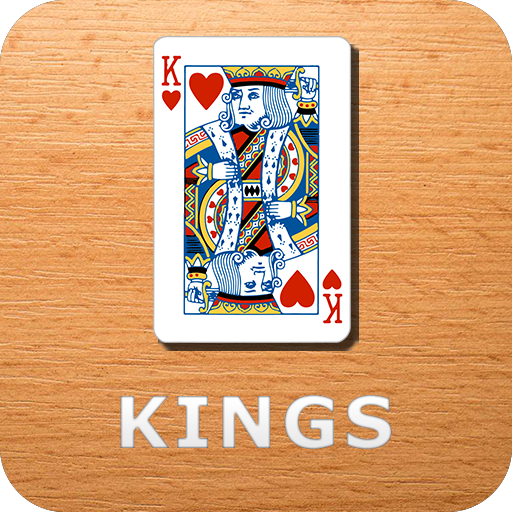
<style>
.page{position:relative;width:512px;height:512px}
.page>*{position:absolute;margin:0}
.t1{font:72px "Verdana-Bold";letter-spacing:0.05em;color:#ffffff}
</style>
<div class="page">
<p class="t1" style="left:120px;top:395px;width:272px;height:54px">KINGS</p>
</div>
